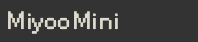
<style>
.page{position:relative;width:198px;height:42px;background:#333333}
.page>*{position:absolute;margin:0}
.t1{font:35.1px "HelvetiPixel";color:#dedbce}
</style>
<div class="page">
<p class="t1" style="left:8px;top:11px;width:110px;height:23px">MiyooMini</p>
<p class="t1" style="left:8px;top:11px;width:110px;height:23px">MiyooMini</p>
</div>
